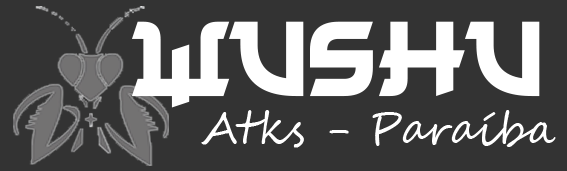
<style>
.page{position:relative;width:567px;height:171px;background:#333333}
.page>*{position:absolute;margin:0}
.t1{font:117.5px "Japanese2020";color:#ffffff}
.t2{font:43.9px "SegoeScript";color:#ffffff}
</style>
<div class="page">
<p class="t1" style="left:132px;top:21px;width:408px;height:87px">wushu</p>
<p class="t2" style="left:201px;top:110px;width:355px;height:38px">Atks - Paraíba</p>
</div>
